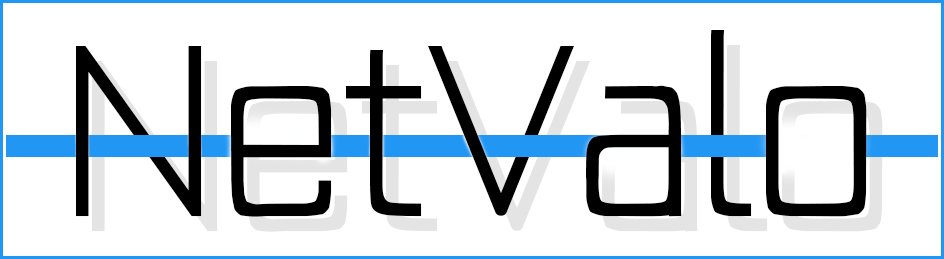
<style>
.page{position:relative;width:944px;height:259px;background:#ffffff}
.page>*{position:absolute;margin:0}
.t1{font:250px "modern_squared2";color:#000000}
</style>
<div class="page">
<p class="t1" style="left:76px;top:30px;width:791px;height:187px">NetValo</p>
</div>
